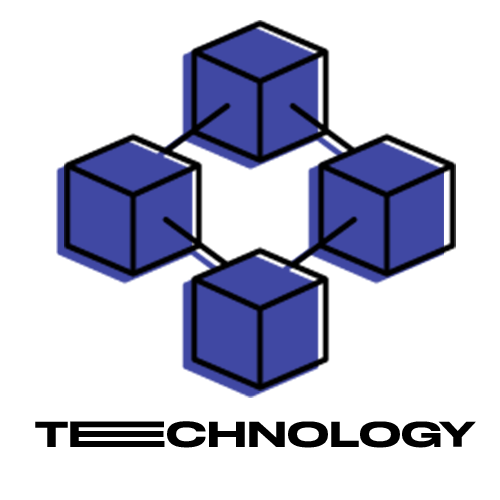
<style>
.page{position:relative;width:500px;height:500px;background:#ffffff}
.page>*{position:absolute;margin:0}
.t1{font:36px "StretchProRegular";color:#000000}
</style>
<div class="page">
<p class="t1" style="left:35px;top:421px;width:441px;height:27px">TEECHNOLOGY</p>
</div>
